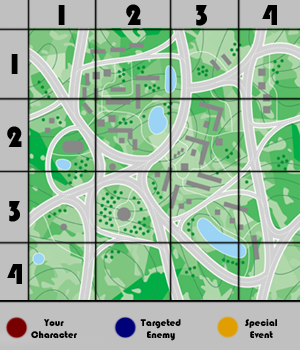
<style>
.page{position:relative;width:300px;height:350px;background:#c0c0c0}
.page>*{position:absolute;margin:0}
.t1{font:10px "Bauhaus93";color:#000000}
</style>
<div class="page">
<p class="t1" style="left:31px;top:319px;width:46px;height:19px;text-align:center">Your<br>Character</p>
<p class="t1" style="left:140px;top:319px;width:41px;height:22px;text-align:center">Targeted<br>Enemy</p>
<p class="t1" style="left:245px;top:319px;width:32px;height:19px;text-align:center">Special<br>Event</p>
</div>
